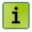
<style>
.page{position:relative;width:32px;height:32px}
.page>*{position:absolute;margin:0}
.t1{font:24px "Inconsolata";color:#000000}
</style>
<div class="page">
<p class="t1" style="left:12px;top:7px;width:8px;height:17px">i</p>
</div>
